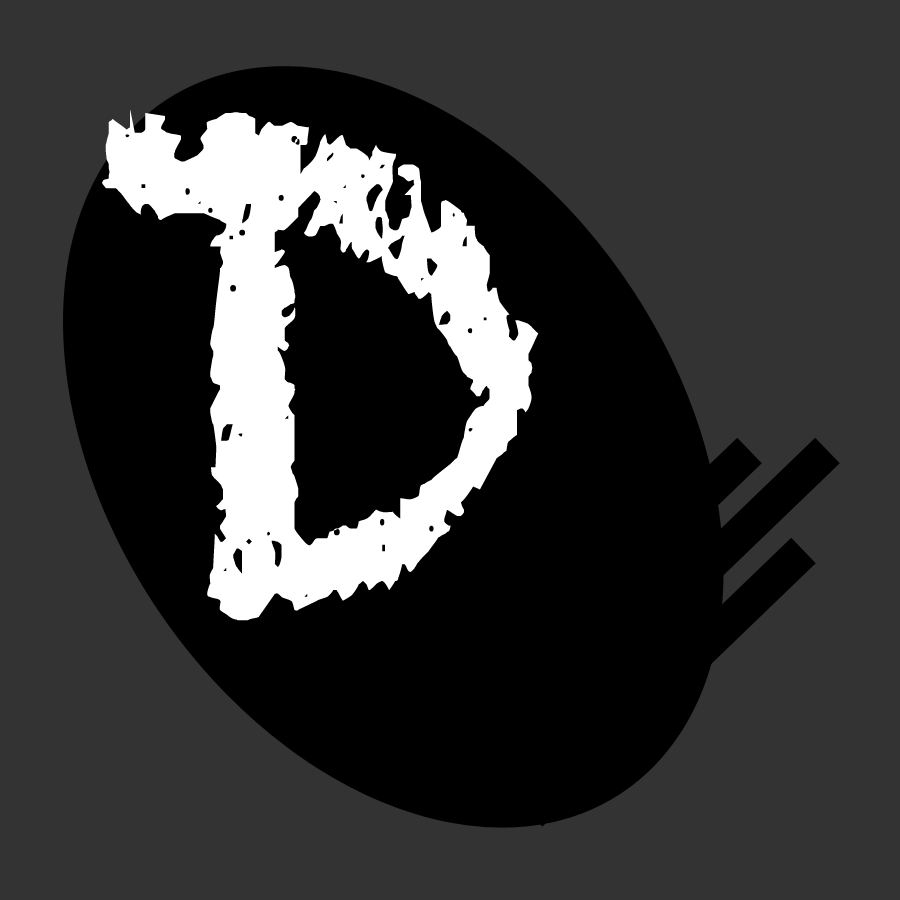
<style>
.page{position:relative;width:900px;height:900px;background:#333333}
.page>*{position:absolute;margin:0}
.t1{font:685.1px "Chalkduster";color:#ffffff}
</style>
<div class="page">
<p class="t1" style="left:102px;top:110px;width:437px;height:511px">D</p>
</div>
